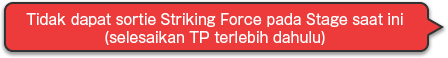
<style>
.page{position:relative;width:448px;height:58px;background:#ed3b3b}
.page>*{position:absolute;margin:0}
.t1{font:14px/18px "GothicMB101Pro-Regular";color:#ffffff}
</style>
<div class="page">
<p class="t1" style="left:26px;top:13px;width:377px;height:32px;text-align:center">Tidak dapat sortie Striking Force pada Stage saat ini<br>(selesaikan TP terlebih dahulu)</p>
</div>
